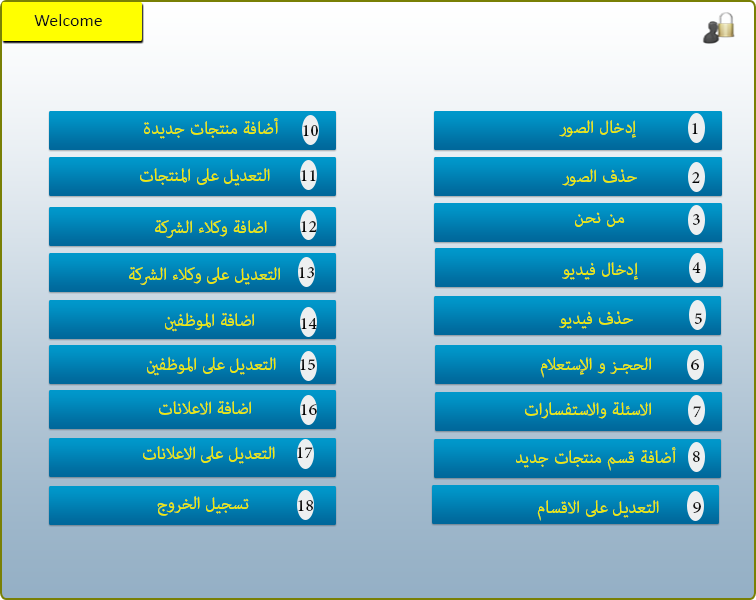
<style>
.page{position:relative;width:756px;height:600px}
.page>*{position:absolute;margin:0}
.t1{font:18px "Calibri";color:#0f0f0f}
.t2{font:24px "AdobeArabic-Regular";color:#eeeb07}
.t3{font:24px "AdobeArabic-Regular";color:#131313}
.t4{font:24px "AdobeArabic-Regular";color:#121212}
.t5{font:24px "AdobeArabic-Regular";color:#101010}
.t6{font:24px "AdobeArabic-Regular"}
.t7{font:24px "AdobeArabic-Regular";color:#111111}
.t8{font:24px "AdobeArabic-Regular";color:#151515}
.t9{font:24px "AdobeArabic-Regular";color:#141414}
.t10{font:24px "AdobeArabic-Regular";color:#0c0c0c}
.t11{font:24px "AdobeArabic-Regular";color:#1d1d1d}
.t12{font:24px "AdobeArabic-Regular";color:#0f0f0f}
.t13{font:24px "AdobeArabic-Regular";color:#232323}
.t14{font:24px "AdobeArabic-Regular";color:#1c1c1c}
.t15{font:24px "AdobeArabic-Regular";color:#181818}
</style>
<div class="page">
<p class="t1" style="left:34px;top:14px;width:68px;height:12px">Welcome</p>
<p class="t2" style="left:144px;top:118px;width:135px;height:21px">أضافة منتجات جديدة</p>
<p class="t3" style="left:303px;top:125px;width:15px;height:11px">10</p>
<p class="t2" style="left:559px;top:120px;width:77px;height:18px">إدخال الصور</p>
<p class="t4" style="left:692px;top:123px;width:6px;height:11px">1</p>
<p class="t2" style="left:140px;top:168px;width:130px;height:18px">التعديل على المنتجات</p>
<p class="t5" style="left:301px;top:170px;width:15px;height:11px">11</p>
<p class="t2" style="left:562px;top:169px;width:75px;height:17px">حذف الصور</p>
<p class="t6" style="left:692px;top:172px;width:8px;height:11px">2</p>
<p class="t2" style="left:155px;top:220px;width:112px;height:18px">اضافة وكلاء الشركة</p>
<p class="t7" style="left:301px;top:221px;width:16px;height:11px">12</p>
<p class="t2" style="left:575px;top:212px;width:50px;height:15px">من نحن</p>
<p class="t8" style="left:693px;top:214px;width:7px;height:11px">3</p>
<p class="t2" style="left:129px;top:267px;width:151px;height:18px">التعديل على وكلاء الشركة</p>
<p class="t9" style="left:299px;top:267px;width:15px;height:11px">13</p>
<p class="t2" style="left:562px;top:262px;width:76px;height:18px">إدخال فيديو</p>
<p class="t10" style="left:692px;top:262px;width:9px;height:11px">4</p>
<p class="t2" style="left:165px;top:312px;width:89px;height:20px">اضافة الموظفين</p>
<p class="t10" style="left:301px;top:318px;width:16px;height:11px">14</p>
<p class="t2" style="left:559px;top:311px;width:74px;height:18px">حذف فيديو</p>
<p class="t11" style="left:694px;top:313px;width:8px;height:11px">5</p>
<p class="t2" style="left:147px;top:356px;width:129px;height:20px">التعديل على الموظفين</p>
<p class="t9" style="left:300px;top:359px;width:15px;height:11px">15</p>
<p class="t2" style="left:540px;top:357px;width:111px;height:21px">الحجـز و الإستعلام</p>
<p class="t12" style="left:691px;top:359px;width:8px;height:11px">6</p>
<p class="t2" style="left:159px;top:401px;width:92px;height:14px">اضافة الاعلانات</p>
<p class="t5" style="left:301px;top:404px;width:16px;height:11px">16</p>
<p class="t2" style="left:525px;top:402px;width:126px;height:17px">الاسئلة والاستفسارات</p>
<p class="t13" style="left:693px;top:406px;width:8px;height:11px">7</p>
<p class="t2" style="left:143px;top:446px;width:132px;height:18px">التعديل على الاعلانات</p>
<p class="t14" style="left:297px;top:447px;width:16px;height:11px">17</p>
<p class="t2" style="left:516px;top:447px;width:160px;height:24px">أضافة قسم منتجات جديد</p>
<p class="t8" style="left:693px;top:451px;width:7px;height:11px">8</p>
<p class="t2" style="left:157px;top:496px;width:92px;height:20px">تسجيل الخروج</p>
<p class="t9" style="left:298px;top:500px;width:15px;height:11px">18</p>
<p class="t2" style="left:537px;top:500px;width:122px;height:21px">التعديل على الاقسام</p>
<p class="t15" style="left:693px;top:502px;width:8px;height:11px">9</p>
</div>
